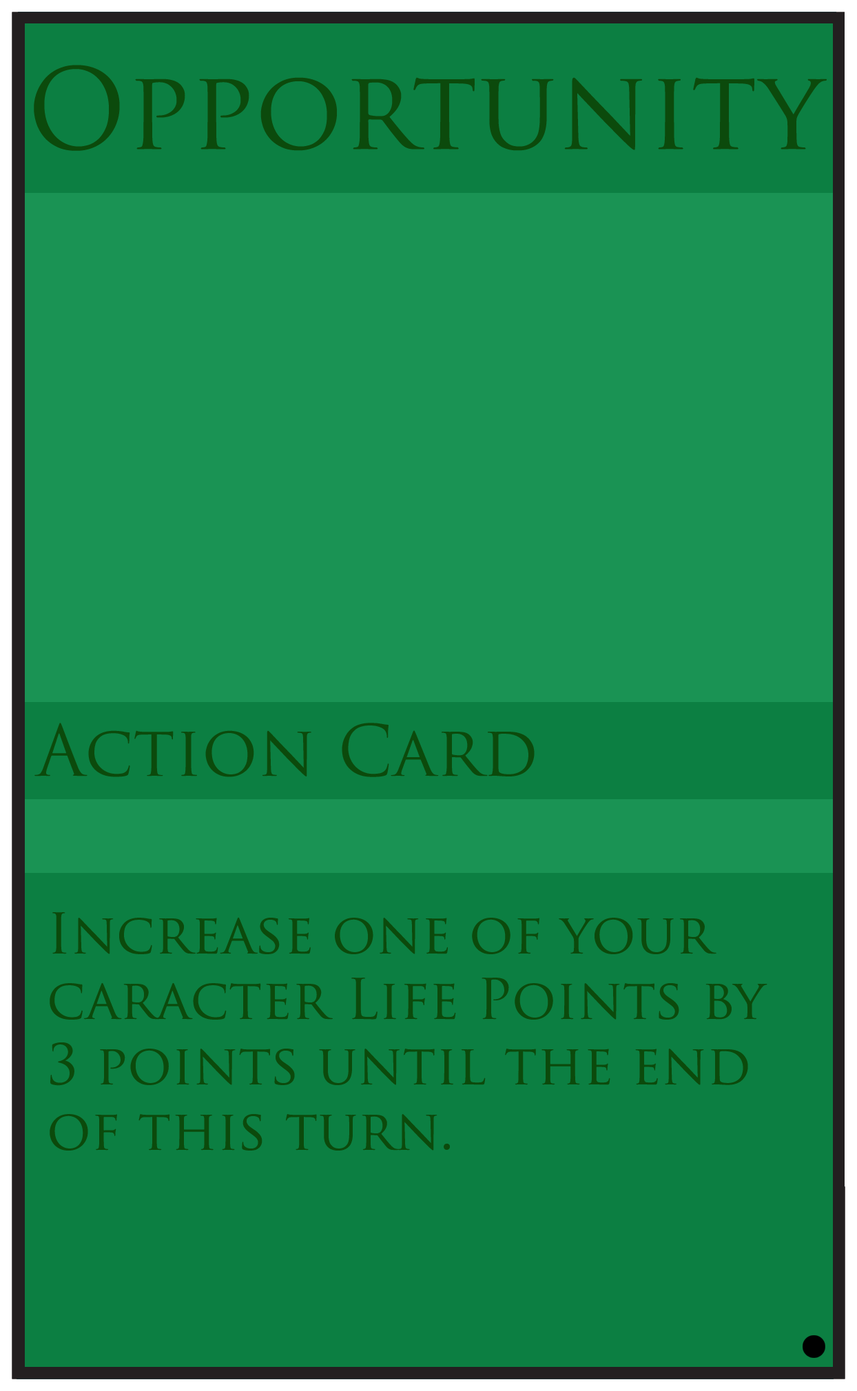
<style>
.page{position:relative;width:857px;height:1391px;background:#0c7f42}
.page>*{position:absolute;margin:0}
.t1{font:109.1px "TrajanPro-Regular";color:#0c4a0c}
.t2{font:68.9px "TrajanPro-Regular";color:#0c4a0c}
.t3{font:54.5px "TrajanPro-Regular";color:#0c4a0c}
</style>
<div class="page">
<p class="t1" style="left:34px;top:65px;width:793px;height:86px">Opportunity</p>
<p class="t2" style="left:34px;top:723px;width:501px;height:54px">Action Card</p>
<p class="t3" style="left:50px;top:912px;width:718px;height:239px">Increase one of your <br>caracter Life Points by <br>3 points until the end <br>of this turn.</p>
</div>
